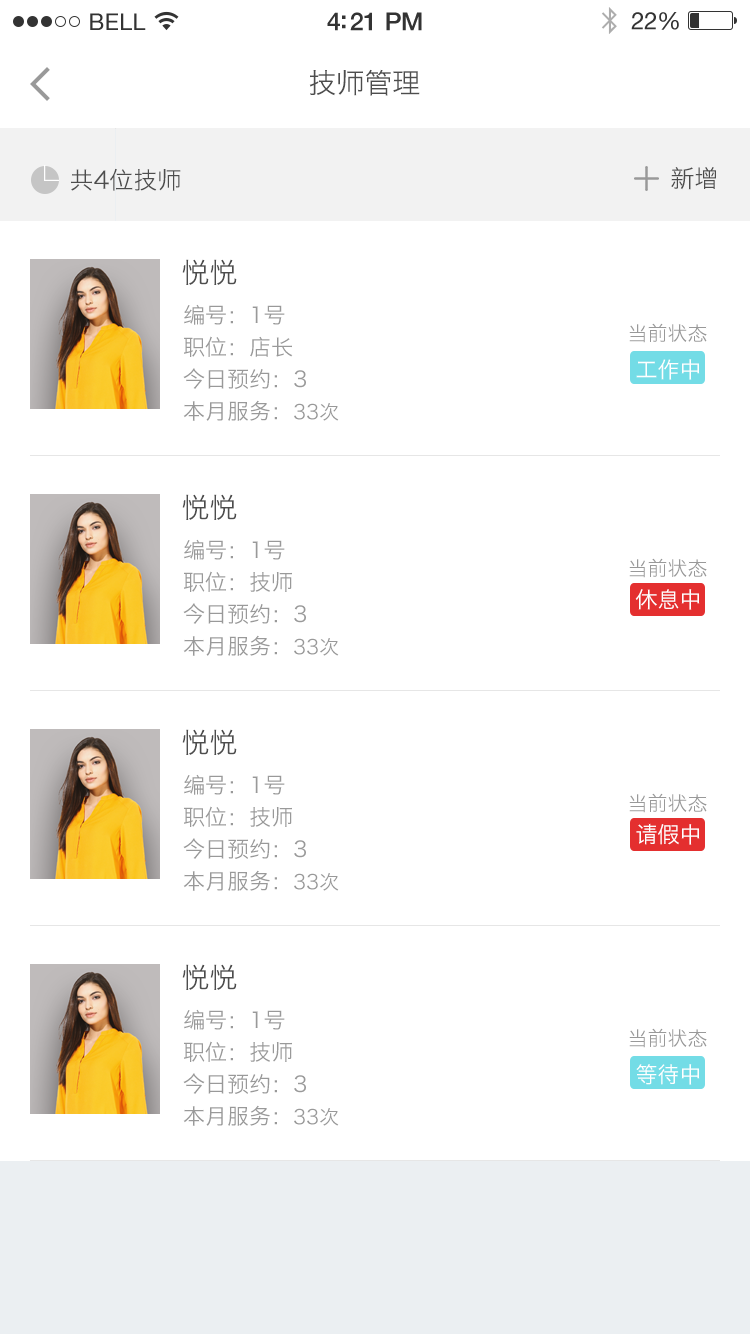
<style>
.page{position:relative;width:750px;height:1334px;background:#ffffff}
.page>*{position:absolute;margin:0}
.t1{font:28px "HiraginoSansGB-W3";color:#4d4d4d}
.t2{font:24px "HiraginoSansGB-W3";color:#4d4d4d}
.t3{font:22px/32px "HiraginoSansGB-W3";color:#999999}
.t4{font:20px/32px "HiraginoSansGB-W3";color:#999999}
.t5{font:20px "HiraginoSansGB-W3";color:#999999}
.t6{font:22px "HiraginoSansGB-W3";color:#ffffff}
</style>
<div class="page">
<p class="t1" style="left:309px;top:69px;width:111px;height:27px">技师管理</p>
<p class="t2" style="left:71px;top:168px;width:110px;height:23px">共4位技师</p>
<p class="t2" style="left:671px;top:167px;width:45px;height:23px">新增</p>
<p class="t1" style="left:182px;top:259px;width:55px;height:26px">悦悦</p>
<p class="t3" style="left:183px;top:304px;width:156px;height:117px;text-align:justify">编号：1号<br>职位：店长<br>今日预约：3<br>本月服务：<span class="t4">33次</span></p>
<p class="t5" style="left:629px;top:323px;width:78px;height:20px">当前状态</p>
<p class="t6" style="left:636px;top:359px;width:64px;height:21px">工作中</p>
<p class="t1" style="left:182px;top:494px;width:55px;height:26px">悦悦</p>
<p class="t3" style="left:183px;top:539px;width:156px;height:117px;text-align:justify">编号：1号<br>职位：技师<br>今日预约：3<br>本月服务：<span class="t4">33次</span></p>
<p class="t5" style="left:629px;top:558px;width:78px;height:20px">当前状态</p>
<p class="t6" style="left:635px;top:589px;width:65px;height:21px">休息中</p>
<p class="t1" style="left:182px;top:729px;width:55px;height:26px">悦悦</p>
<p class="t3" style="left:183px;top:774px;width:156px;height:117px;text-align:justify">编号：1号<br>职位：技师<br>今日预约：3<br>本月服务：<span class="t4">33次</span></p>
<p class="t5" style="left:629px;top:793px;width:78px;height:20px">当前状态</p>
<p class="t6" style="left:636px;top:823px;width:64px;height:22px">请假中</p>
<p class="t1" style="left:182px;top:964px;width:55px;height:26px">悦悦</p>
<p class="t3" style="left:183px;top:1009px;width:156px;height:117px;text-align:justify">编号：1号<br>职位：技师<br>今日预约：3<br>本月服务：<span class="t4">33次</span></p>
<p class="t5" style="left:629px;top:1028px;width:78px;height:20px">当前状态</p>
<p class="t6" style="left:636px;top:1064px;width:64px;height:21px">等待中</p>
</div>
